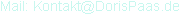
<style>
.page{position:relative;width:180px;height:14px;background:#ffffff}
.page>*{position:absolute;margin:0}
.t1{font:14px "ArialMT";color:#c8f7ef}
</style>
<div class="page">
<p class="t1" style="left:1px;top:1px;width:178px;height:13px">Mail: Kontakt@DorisPaas.de</p>
</div>
